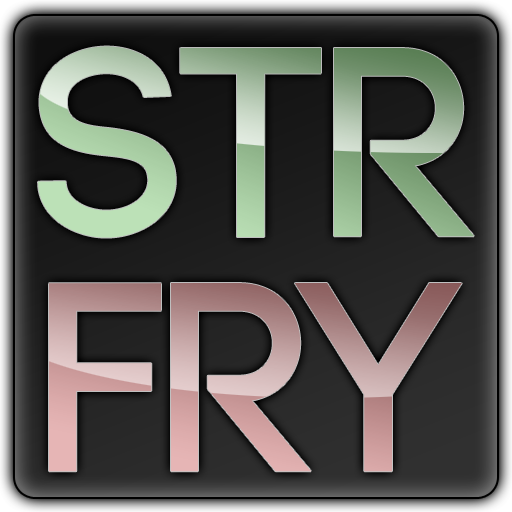
<style>
.page{position:relative;width:512px;height:512px}
.page>*{position:absolute;margin:0}
.t1{font:268.2px "Code-Bold"}
</style>
<div class="page">
<p class="t1" style="left:38px;top:46px;width:436px;height:192px">Str</p>
<p class="t1" style="left:49px;top:283px;width:413px;height:189px">FRY</p>
</div>
